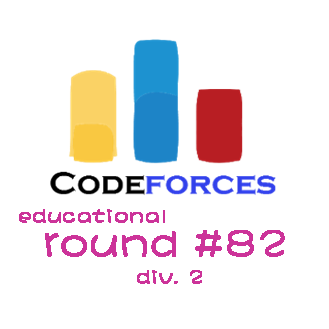
<style>
.page{position:relative;width:329px;height:329px;background:#ffffff}
.page>*{position:absolute;margin:0}
.t1{font:20px "DFPShaoNvW5";letter-spacing:0.02em;color:#cc3399;font-weight:bold}
.t2{font:40px "DFPShaoNvW5";letter-spacing:0.02em;color:#cc3399;font-weight:bold}
</style>
<div class="page">
<p class="t1" style="left:19px;top:209px;width:146px;height:14px">educational</p>
<p class="t2" style="left:45px;top:230px;width:240px;height:27px">round #82</p>
<p class="t1" style="left:137px;top:270px;width:65px;height:14px">div. 2</p>
</div>
